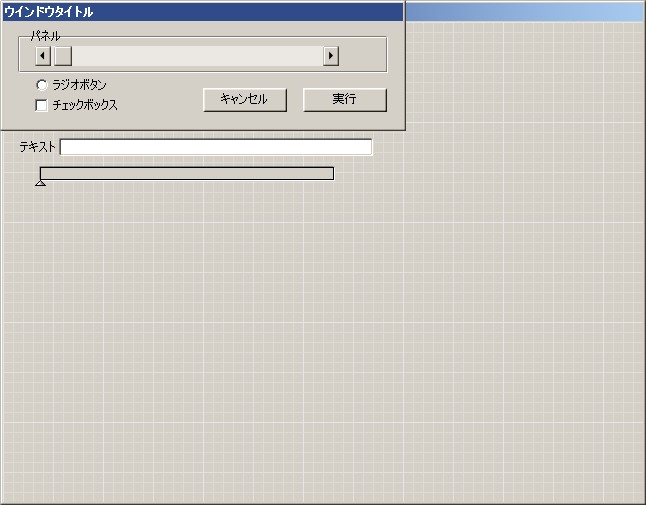
<style>
.page{position:relative;width:646px;height:505px;background:#d4d0c8}
.page>*{position:absolute;margin:0}
.t1{font:12px "MS-UIGothic";color:#ffffff;font-weight:bold}
.t2{font:12px "MS-UIGothic";color:#000000}
</style>
<div class="page">
<p class="t1" style="left:5px;top:6px;width:88px;height:11px">ウインドウタイトル</p>
<p class="t2" style="left:31px;top:30px;width:29px;height:11px">パネル</p>
<p class="t2" style="left:53px;top:79px;width:53px;height:11px">ラジオボタン</p>
<p class="t2" style="left:53px;top:99px;width:64px;height:11px">チェックボックス</p>
<p class="t2" style="left:221px;top:93px;width:46px;height:11px">キャンセル</p>
<p class="t2" style="left:333px;top:93px;width:23px;height:11px">実行</p>
<p class="t2" style="left:20px;top:141px;width:35px;height:11px">テキスト</p>
</div>
